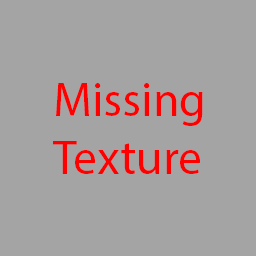
<style>
.page{position:relative;width:256px;height:256px;background:#a4a4a4}
.page>*{position:absolute;margin:0}
.t1{font:48px "MyriadPro-Regular";color:#ff0000}
</style>
<div class="page">
<p class="t1" style="left:53px;top:83px;width:150px;height:91px">Missing<br>Texture</p>
</div>
